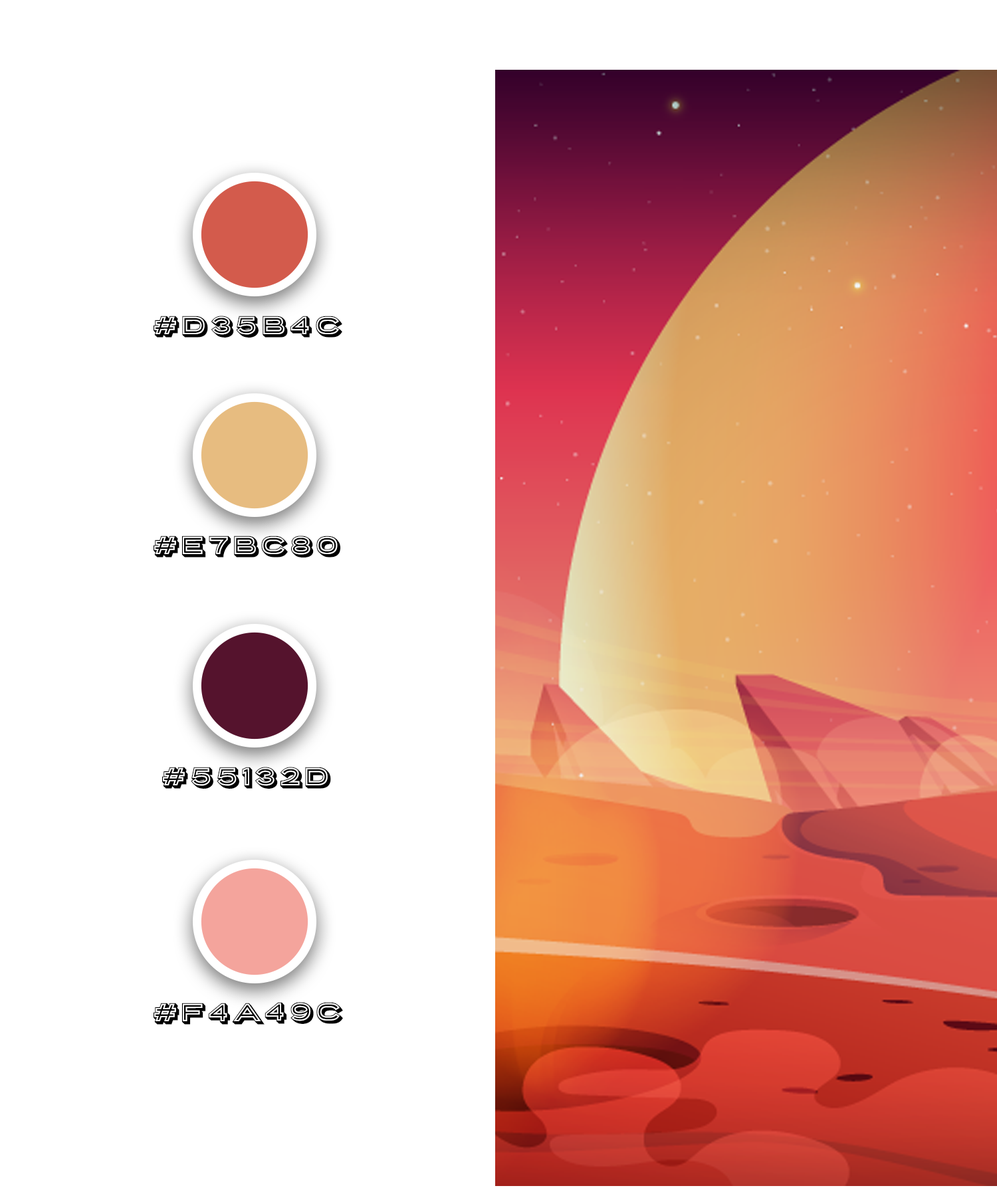
<style>
.page{position:relative;width:997px;height:1196px;background:#ffffff}
.page>*{position:absolute;margin:0}
.t1{font:24.9px "PorterSansBlock";color:#000000}
</style>
<div class="page">
<p class="t1" style="left:154px;top:316px;width:188px;height:22px">#D35B4C</p>
<p class="t1" style="left:154px;top:536px;width:187px;height:22px">#E7BC80</p>
<p class="t1" style="left:162px;top:767px;width:169px;height:22px">#55132D</p>
<p class="t1" style="left:154px;top:1002px;width:189px;height:23px">#F4A49C</p>
</div>
